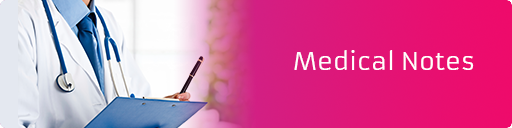
<style>
.page{position:relative;width:512px;height:128px}
.page>*{position:absolute;margin:0}
.t1{font:24px "Armata-Regular";color:#ffffff}
</style>
<div class="page">
<p class="t1" style="left:294px;top:50px;width:180px;height:20px">Medical Notes</p>
</div>
